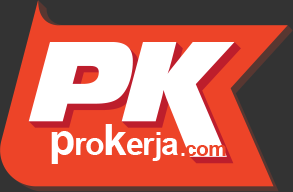
<style>
.page{position:relative;width:293px;height:192px;background:#ed4428}
.page>*{position:absolute;margin:0}
.t1{font:32.3px "Arial-BoldMT";letter-spacing:-0.04em;color:#ffffff}
.t2{font:43.3px "Arial-BoldMT";letter-spacing:-0.04em;color:#ffffff}
.t3{font:21.3px "Arial-BoldMT";letter-spacing:-0.04em;color:#ed4428}
.t4{font:21.3px "Arial-BoldMT";letter-spacing:-0.04em;color:#fffefe}
</style>
<div class="page">
<p class="t1" style="left:51px;top:124px;width:127px;height:40px"><span class="t2">p</span>ro<span class="t2">k</span>erja</p>
<p class="t3" style="left:181px;top:145px;width:45px;height:11px"><span class="t4">.</span>com</p>
</div>
